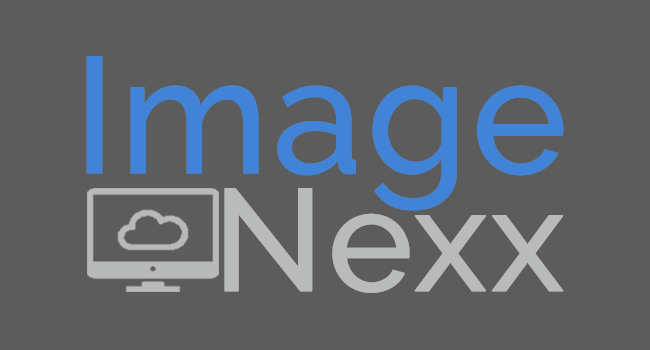
<style>
.page{position:relative;width:650px;height:350px;background:#5c5c5c}
.page>*{position:absolute;margin:0}
.t1{font:164px "Raleway-Medium";color:#4183d7;font-weight:bold}
.t2{font:144px "Raleway-Medium";color:#b9baba;font-weight:bold}
</style>
<div class="page">
<p class="t1" style="left:86px;top:56px;width:478px;height:155px">Image</p>
<p class="t2" style="left:224px;top:188px;width:340px;height:105px">Nexx</p>
</div>
